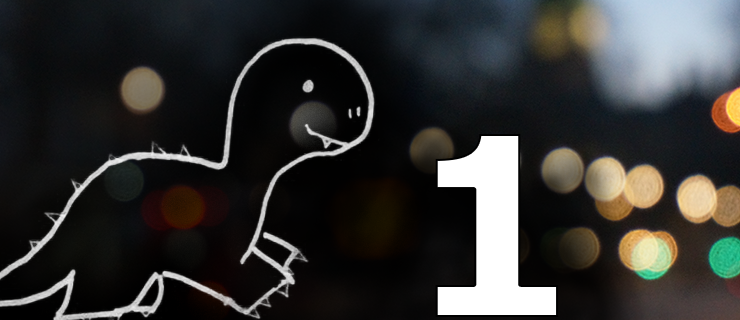
<style>
.page{position:relative;width:740px;height:320px}
.page>*{position:absolute;margin:0}
.t1{font:252px "Verdana-Bold";color:#ffffff}
</style>
<div class="page">
<p class="t1" style="left:435px;top:134px;width:124px;height:183px">1</p>
</div>
